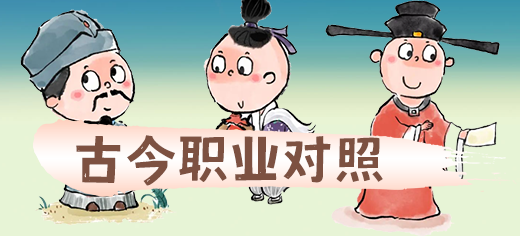
<style>
.page{position:relative;width:520px;height:236px}
.page>*{position:absolute;margin:0}
.t1{font:52px "HYCZhuoHei";color:#7d5141}
</style>
<div class="page">
<p class="t1" style="left:76px;top:135px;width:307px;height:51px">古今职业对照</p>
</div>
